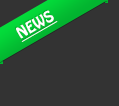
<style>
.page{position:relative;width:119px;height:106px;background:#333333}
.page>*{position:absolute;margin:0}
.t1{font:14px "HoboStd";letter-spacing:0.02em;color:#ffffff;text-decoration:underline}
</style>
<div class="page">
<p class="t1" style="left:16px;top:10px;width:42px;height:32px;rotate:-30deg">NEWS</p>
</div>
